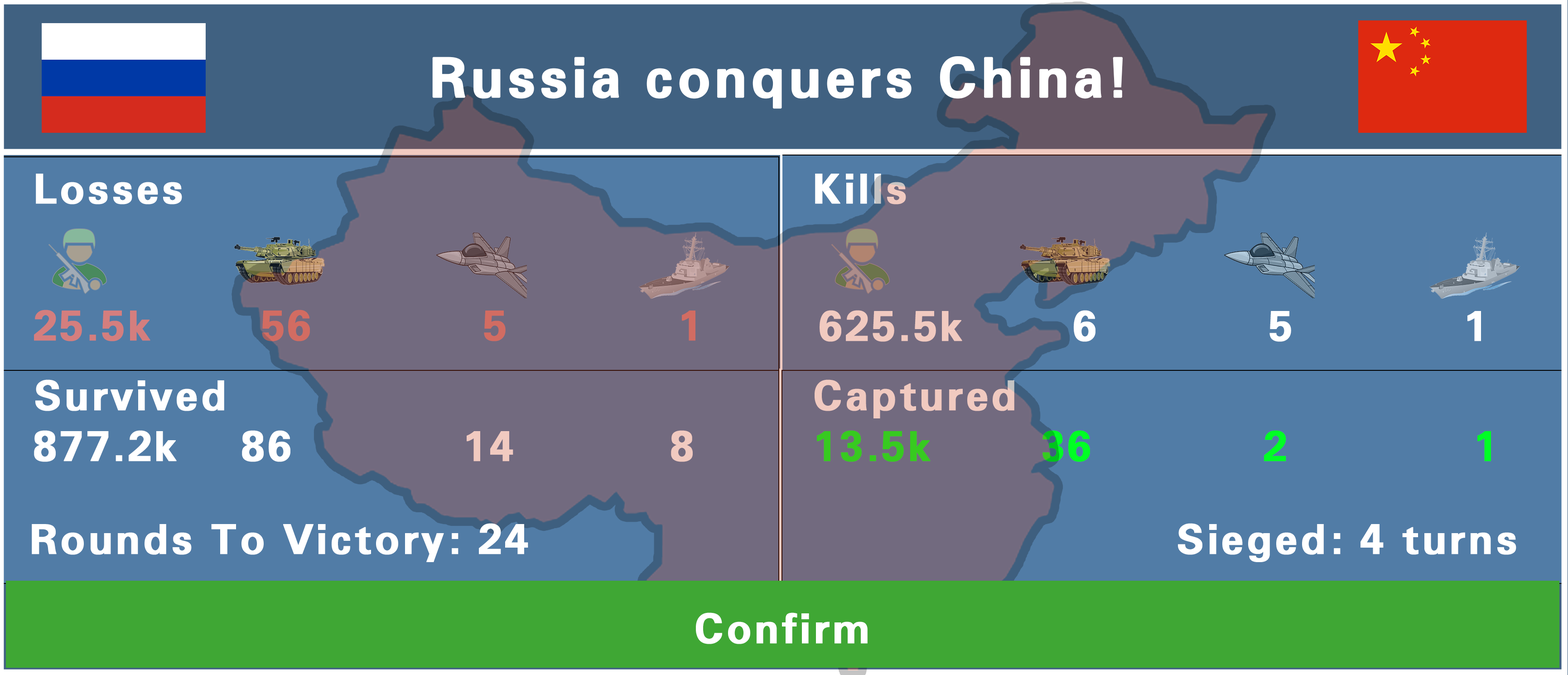
<style>
.page{position:relative;width:1568px;height:675px;background:#517ca6}
.page>*{position:absolute;margin:0}
.t1{font:54.4px "FreeUniversal-Bold";letter-spacing:0.05em;color:#ffffff;font-weight:bold}
.t2{font:40.8px "FreeUniversal-Bold";letter-spacing:0.05em;color:#ffffff;font-weight:bold}
.t3{font:40.8px "FreeUniversal-Bold";letter-spacing:0.05em;font-weight:bold}
.t4{font:40.8px "FreeUniversal-Bold";letter-spacing:0.05em;color:#f1cac0;font-weight:bold}
</style>
<div class="page">
<p class="t1" style="left:432px;top:56px;width:691px;height:53px">Russia conquers China!</p>
<p class="t2" style="left:36px;top:174px;width:146px;height:30px">Losses</p>
<p class="t2" style="left:815px;top:174px;width:91px;height:30px">Kills</p>
<p class="t3" style="left:34px;top:309px;width:661px;height:32px">25.5k       56           5           1</p>
<p class="t3" style="left:820px;top:310px;width:661px;height:32px">625.5k       6           5           1</p>
<p class="t2" style="left:35px;top:379px;width:189px;height:32px">Survived</p>
<p class="t4" style="left:815px;top:379px;width:199px;height:39px">Captured</p>
<p class="t2" style="left:34px;top:430px;width:659px;height:32px">877.2k    86           14          8</p>
<p class="t3" style="left:817px;top:430px;width:674px;height:32px">13.5k       36           2            1</p>
<p class="t2" style="left:32px;top:523px;width:1484px;height:39px">Rounds To Victory: 24                                          Sieged: 4 turns</p>
<p class="t2" style="left:696px;top:612px;width:172px;height:32px">Confirm</p>
</div>
